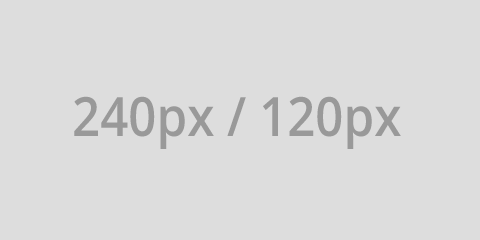
<style>
.page{position:relative;width:480px;height:240px;background:#dddddd}
.page>*{position:absolute;margin:0}
.t1{font:54.2px "OpenSans-Semibold";color:#999999;scale:0.91 1}
</style>
<div class="page">
<p class="t1" style="left:74px;top:96px;width:327px;height:53px">240px / 120px</p>
</div>
